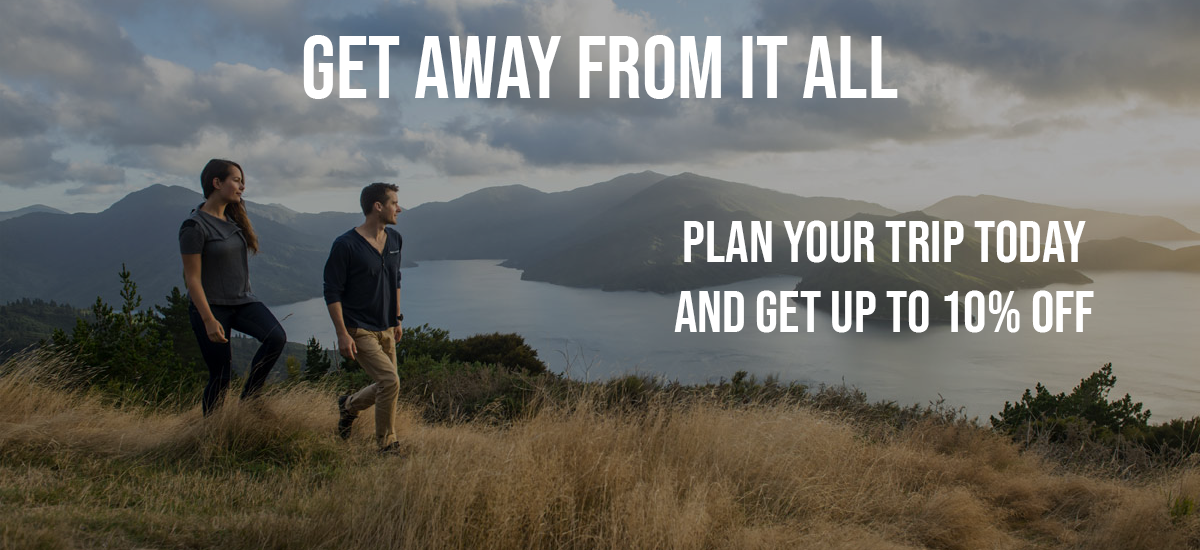
<style>
.page{position:relative;width:1200px;height:550px}
.page>*{position:absolute;margin:0}
.t1{font:88.2px "BebasNeue-Regular";color:#ffffff}
.t2{font:58.6px "BebasNeue-Regular";color:#ffffff}
</style>
<div class="page">
<p class="t1" style="left:303px;top:35px;width:595px;height:64px">Get Away from it all</p>
<p class="t2" style="left:674px;top:220px;width:420px;height:113px;text-align:center">Plan your trip today<br>and get up to 10% off</p>
</div>
